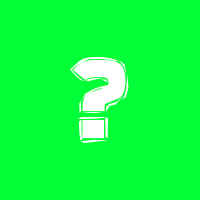
<style>
.page{position:relative;width:200px;height:200px;background:#00ff36}
.page>*{position:absolute;margin:0}
.t1{font:117px "ARDARLING";color:#ffffff}
</style>
<div class="page">
<p class="t1" style="left:70px;top:57px;width:59px;height:86px">?</p>
</div>
